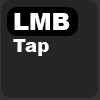
<style>
.page{position:relative;width:100px;height:100px;background:#252525}
.page>*{position:absolute;margin:0}
.t1{font:24px "Arial-Black";color:#ffffff}
.t2{font:18px "Arial-Black";color:#ffffff}
</style>
<div class="page">
<p class="t1" style="left:13px;top:13px;width:57px;height:43px">LMB<br><span class="t2">Tap</span></p>
</div>
